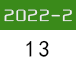
<style>
.page{position:relative;width:76px;height:68px;background:#ffffff}
.page>*{position:absolute;margin:0}
.t1{font:17px "HGZYT_CNKI";letter-spacing:0.1em;color:#ededed}
.t2{font:23px "KaiTi";letter-spacing:0.1em;color:#010000}
</style>
<div class="page">
<p class="t1" style="left:4px;top:9px;width:68px;height:13px">2022-2</p>
<p class="t2" style="left:26px;top:40px;width:23px;height:17px">13</p>
</div>
